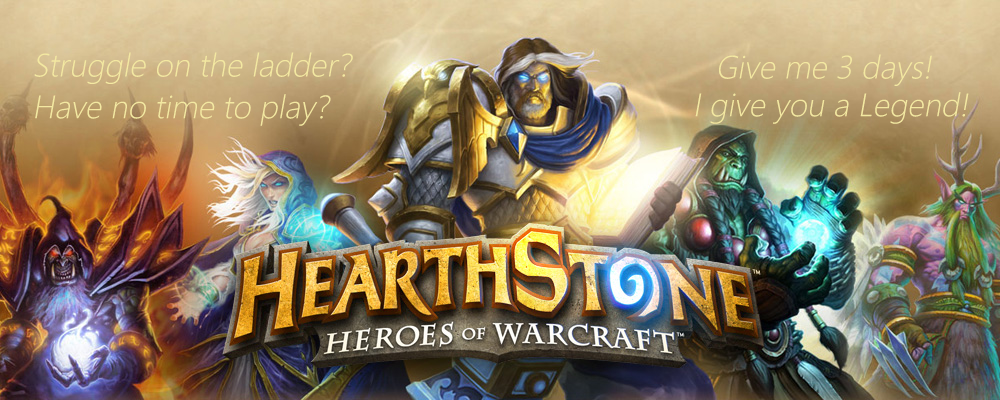
<style>
.page{position:relative;width:1000px;height:400px}
.page>*{position:absolute;margin:0}
.t1{font:30px "MicrosoftYaHeiLight";color:#f3e8a1;font-style:italic}
</style>
<div class="page">
<p class="t1" style="left:34px;top:52px;width:319px;height:32px">Struggle on the ladder?</p>
<p class="t1" style="left:719px;top:54px;width:213px;height:32px">Give me 3 days!</p>
<p class="t1" style="left:35px;top:94px;width:296px;height:32px">Have no time to play?</p>
<p class="t1" style="left:695px;top:92px;width:274px;height:32px">I give you a Legend!</p>
</div>
